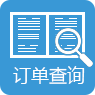
<style>
.page{position:relative;width:95px;height:95px;background:#3998d6}
.page>*{position:absolute;margin:0}
.t1{font:18px "MicrosoftYaHei";color:#ffffff}
</style>
<div class="page">
<p class="t1" style="left:13px;top:66px;width:72px;height:18px">订单查询</p>
</div>
